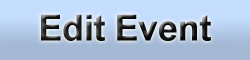
<style>
.page{position:relative;width:250px;height:60px}
.page>*{position:absolute;margin:0}
.t1{font:36px "Arial-BoldMT";letter-spacing:-0.01em}
</style>
<div class="page">
<p class="t1" style="left:41px;top:14px;width:170px;height:27px">Edit Event</p>
</div>
